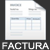
<style>
.page{position:relative;width:50px;height:50px;background:#333333}
.page>*{position:absolute;margin:0}
.t1{font:9.1px "ArialMT";color:#ffffff;scale:1.1 1}
</style>
<div class="page">
<p class="t1" style="left:2px;top:42px;width:47px;height:8px">FACTURA</p>
</div>
